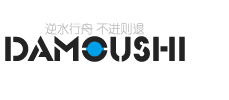
<style>
.page{position:relative;width:229px;height:100px;background:#ffffff}
.page>*{position:absolute;margin:0}
.t1{font:12px "JXiYuan";color:#bababa}
.t2{font:36px "318-CAI978";color:#232323}
</style>
<div class="page">
<p class="t1" style="left:45px;top:22px;width:99px;height:13px">逆水行舟 不进则退</p>
<p class="t2" style="left:5px;top:35px;width:180px;height:27px">damoushi</p>
</div>
